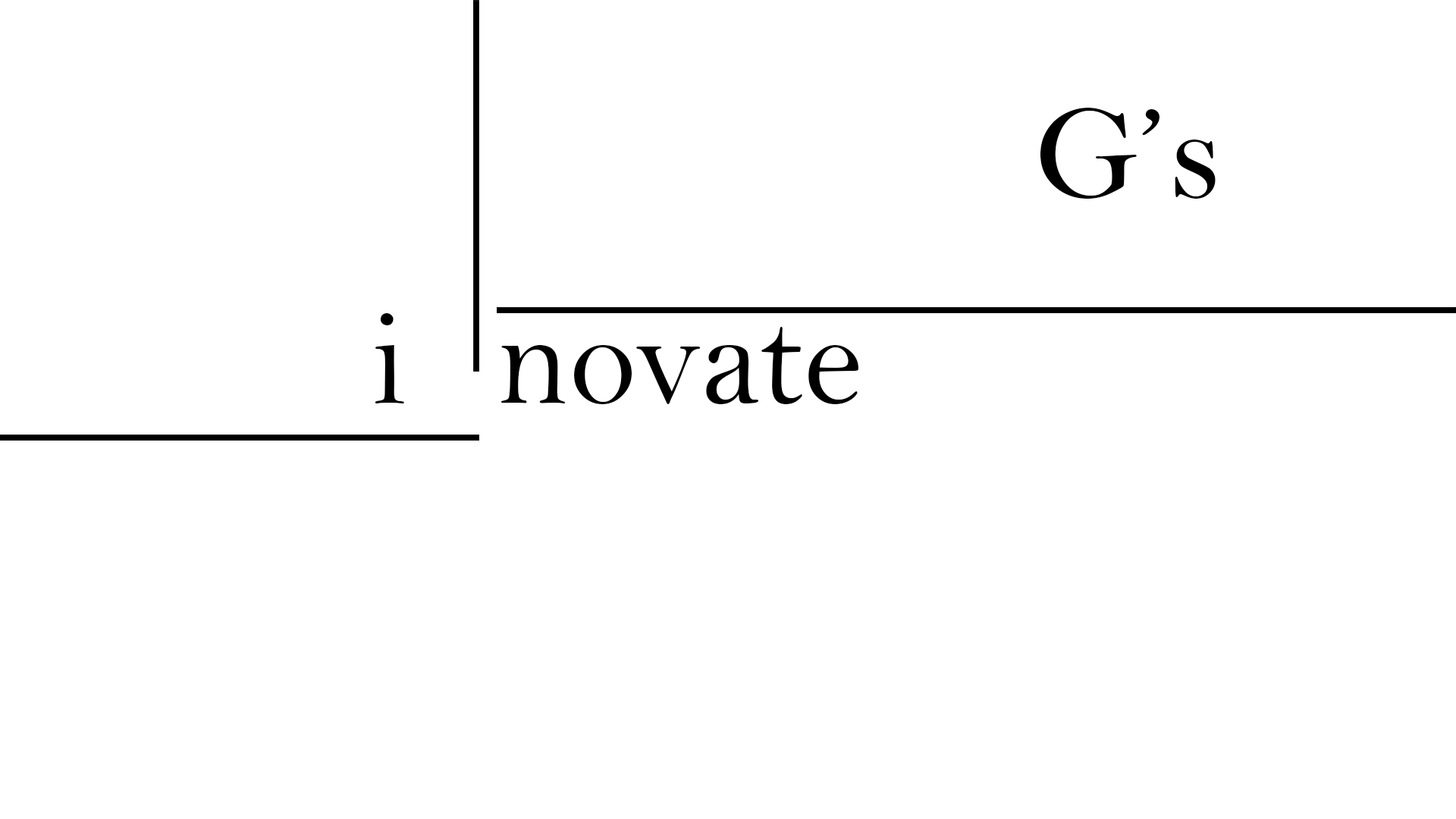
<style>
.page{position:relative;width:1456px;height:819px;background:#ffffff}
.page>*{position:absolute;margin:0}
.t1{font:136.5px "BellMT";color:#000000}
</style>
<div class="page">
<p class="t1" style="left:1040px;top:108px;width:176px;height:91px">G’s</p>
<p class="t1" style="left:375px;top:313px;width:29px;height:90px">i</p>
<p class="t1" style="left:500px;top:327px;width:358px;height:77px">novate</p>
</div>
